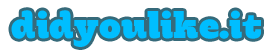
<style>
.page{position:relative;width:270px;height:50px;background:#ffffff}
.page>*{position:absolute;margin:0}
.t1{font:36px "Hernandez-Bold";color:#00beff}
</style>
<div class="page">
<p class="t1" style="left:11px;top:10px;width:250px;height:37px">didyoulike.it</p>
</div>
